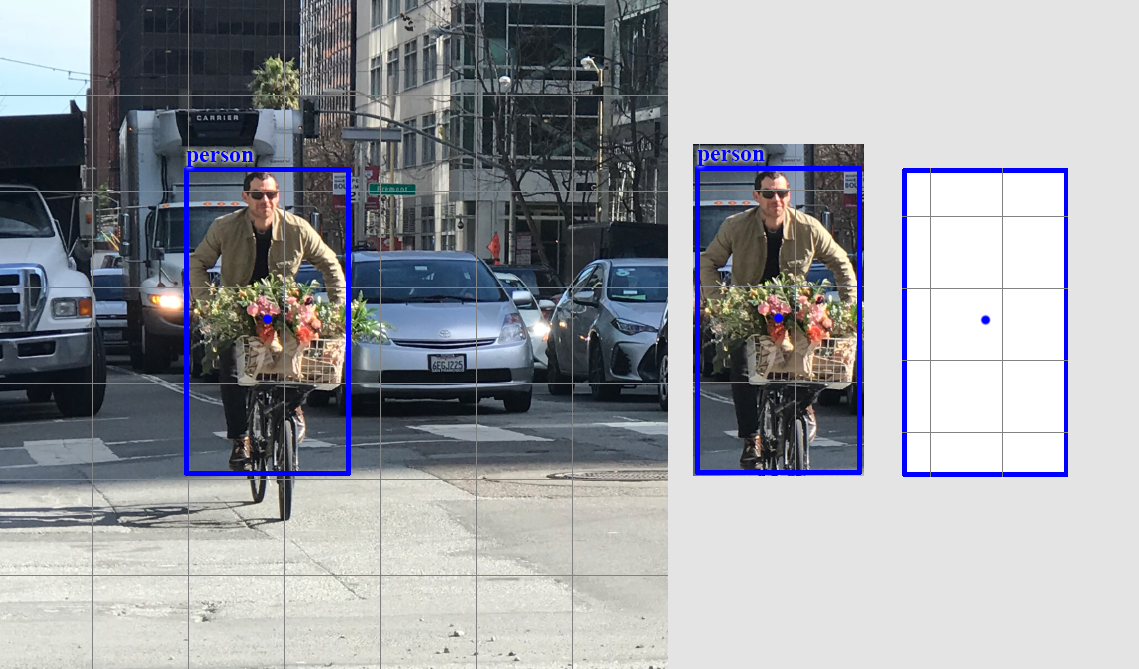
<style>
.page{position:relative;width:1139px;height:669px;background:#e4e4e4}
.page>*{position:absolute;margin:0}
.t1{font:24px "TimesNewRomanPS-BoldMT";letter-spacing:-0.01em;color:#0000ff}
</style>
<div class="page">
<p class="t1" style="left:186px;top:151px;width:68px;height:16px">person</p>
</div>
